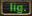
<style>
.page{position:relative;width:32px;height:16px}
.page>*{position:absolute;margin:0}
.t1{font:11px "Arial-BoldMT";letter-spacing:0.02em;color:#39ad21}
</style>
<div class="page">
<p class="t1" style="left:10px;top:3px;width:16px;height:11px">lig.</p>
</div>
